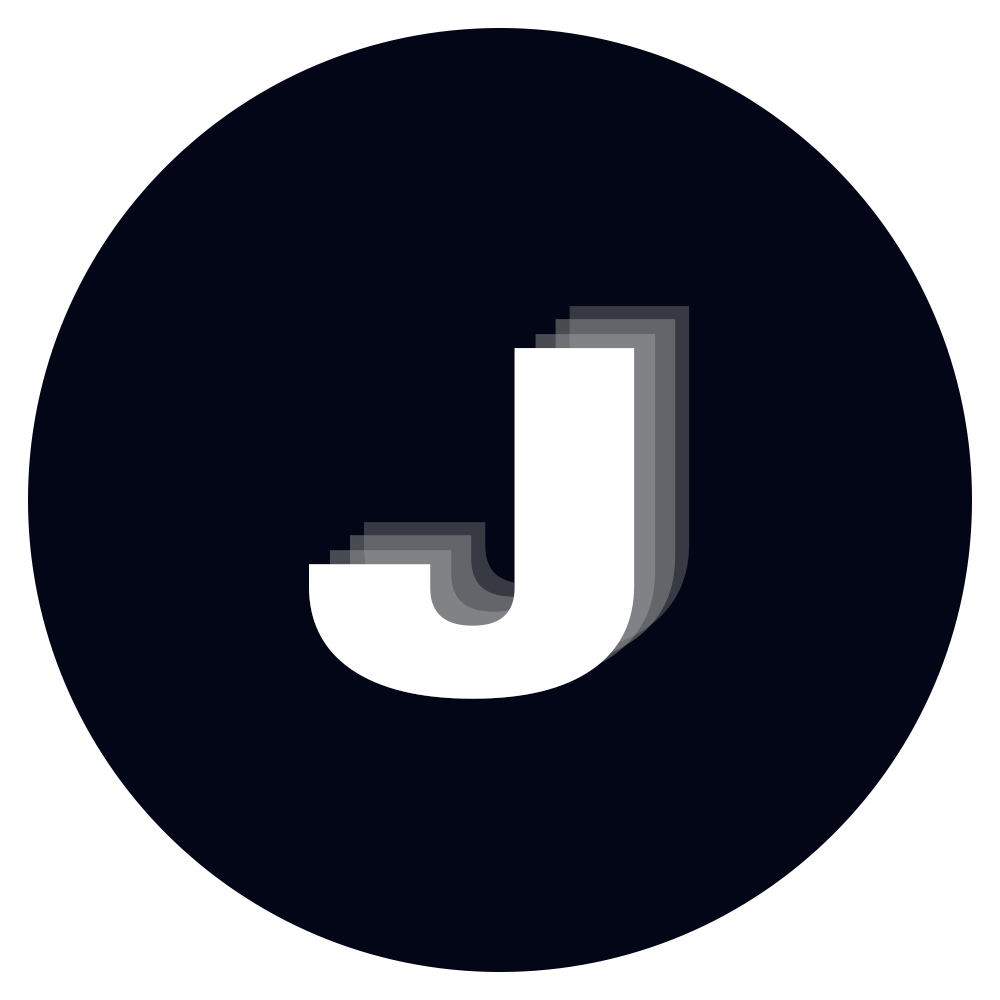
<style>
.page{position:relative;width:1000px;height:1000px;background:#020617}
.page>*{position:absolute;margin:0}
.t1{font:475.4px "Inter-Black";scale:1.29 1}
.t2{font:475.4px "Inter-Black";color:#ffffff;scale:1.29 1}
</style>
<div class="page">
<p class="t1" style="left:364px;top:306px;width:326px;height:351px">J</p>
<p class="t2" style="left:350px;top:319px;width:326px;height:351px;opacity:0.15">J</p>
<p class="t2" style="left:330px;top:334px;width:326px;height:351px;opacity:0.15">J</p>
<p class="t2" style="left:309px;top:348px;width:326px;height:351px">J</p>
</div>
